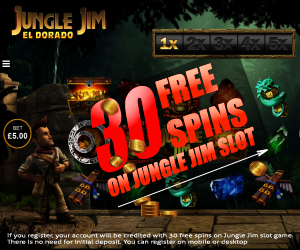
<style>
.page{position:relative;width:300px;height:250px}
.page>*{position:absolute;margin:0}
.t1{font:34.8px "Impact";color:#fa2100}
.t2{font:87.5px "Impact";color:#fa0200;scale:0.77 1}
.t3{font:22.2px "Impact";color:#fa2100;scale:0.92 1}
.t4{font:11.5px "Impact";color:#ffffff;scale:1.95 1}
.t5{font:5.3px "Aller-Light";color:#ffffff;scale:1.39 1}
</style>
<div class="page">
<p class="t1" style="left:155px;top:63px;width:93px;height:85px;rotate:-19deg">FREE <br>SPINS</p>
<p class="t2" style="left:90px;top:86px;width:72px;height:87px;rotate:-21deg">30</p>
<p class="t3" style="left:107px;top:126px;width:148px;height:71px;rotate:-20deg">ON JUNGLE JIM SLOT</p>
<p class="t4" style="left:256px;top:149px;width:12px;height:8px;rotate:-22deg">&gt;</p>
<p class="t5" style="left:7px;top:233px;width:286px;height:12px">If you register, your account will be credited with 30 free spins on Jungle Jim slot game. <br>There is no need for initial deposit. You can register on mobile or desktop</p>
</div>
